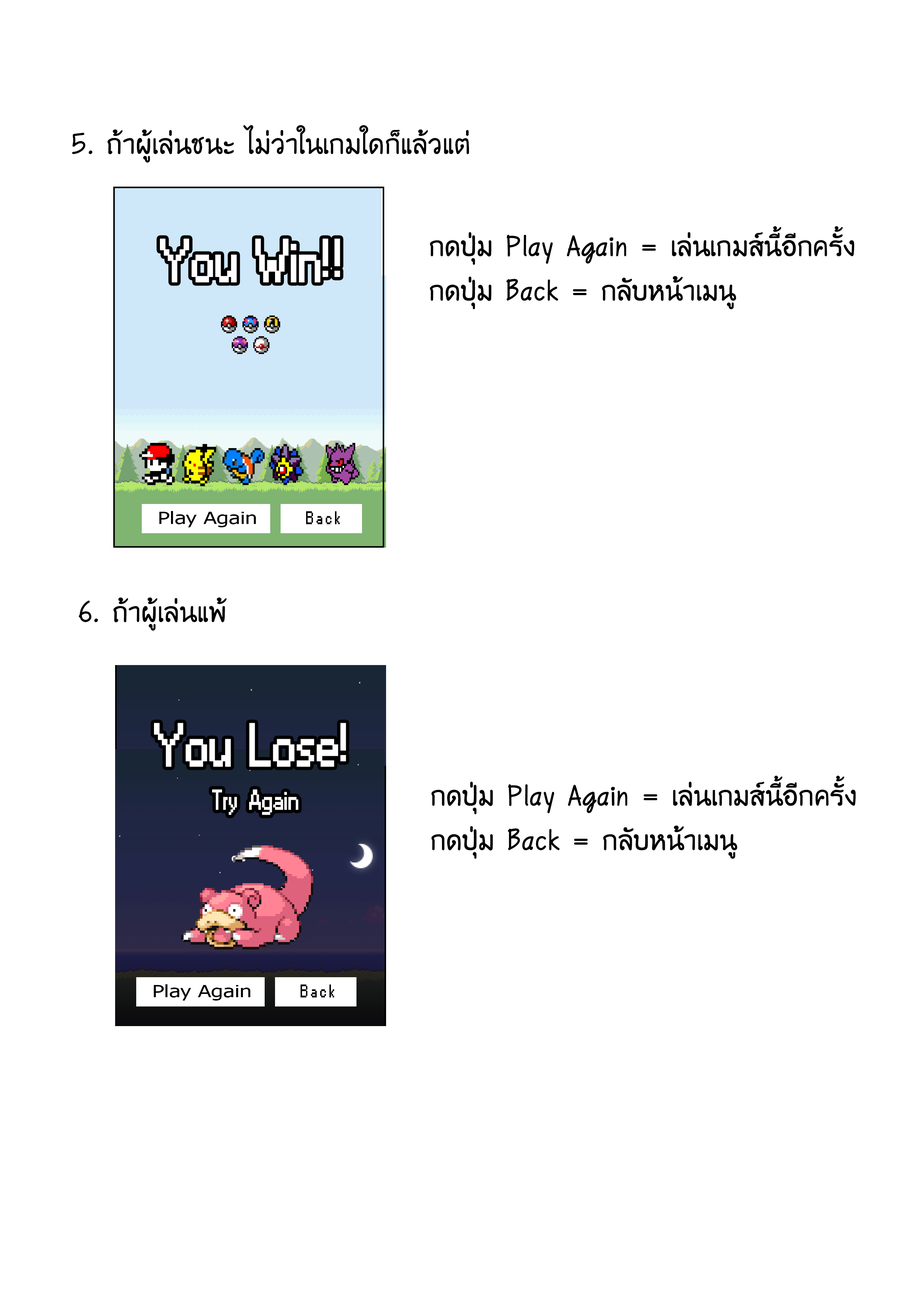
<style>
.page{position:relative;width:918px;height:1299px;background:#ffffff}
.page>*{position:absolute;margin:0}
.t1{font:37px "WRTishKid";color:#000000}
.t2{font:57.1px "Small Fonts";color:#ffffff;font-weight:bold;scale:0.89 1}
.t3{font:17.1px "Tahoma";color:#000000;scale:1.28 1}
.t4{font:17.1px "Small Fonts";letter-spacing:0.2em;color:#000000;font-weight:bold;scale:0.81 1}
.t5{font:26.6px "Small Fonts";color:#ffffff;font-weight:bold;scale:0.89 1}
</style>
<div class="page">
<p class="t1" style="left:72px;top:125px;width:397px;height:38px">5. ถ้าผู้เล่นชนะ ไม่ว่าในเกมใดก็แล้วแต่</p>
<p class="t2" style="left:160px;top:238px;width:180px;height:44px">You  Win!!</p>
<p class="t3" style="left:159px;top:511px;width:97px;height:16px">Play Again</p>
<p class="t4" style="left:306px;top:511px;width:34px;height:13px">Back</p>
<p class="t1" style="left:78px;top:597px;width:149px;height:33px">6. ถ้าผู้เล่นแพ้</p>
<p class="t2" style="left:154px;top:723px;width:192px;height:44px">You  Lose!</p>
<p class="t5" style="left:212px;top:789px;width:86px;height:26px">Try   Again</p>
<p class="t3" style="left:154px;top:984px;width:97px;height:16px">Play Again</p>
<p class="t4" style="left:301px;top:984px;width:33px;height:13px">Back</p>
</div>
